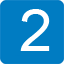
<style>
.page{position:relative;width:64px;height:64px;background:#007cc2}
.page>*{position:absolute;margin:0}
.t1{font:60px "ArialMT";color:#ffffff}
</style>
<div class="page">
<p class="t1" style="left:20px;top:9px;width:30px;height:42px">2</p>
</div>
